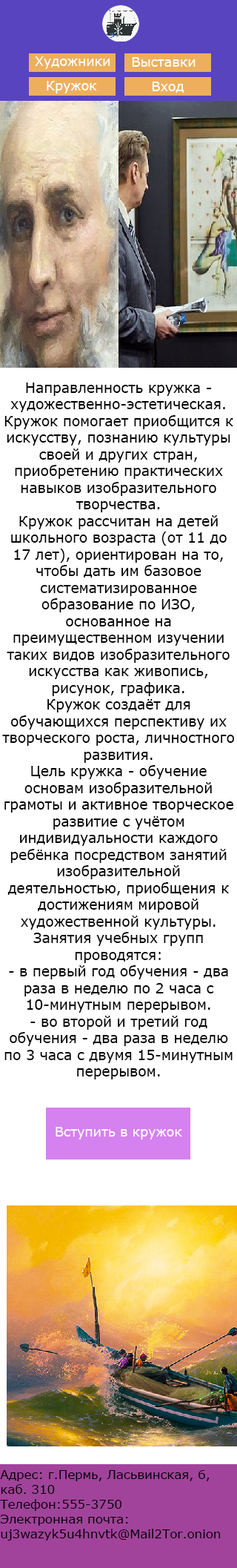
<style>
.page{position:relative;width:237px;height:1568px;background:#ffffff}
.page>*{position:absolute;margin:0}
.t1{font:13.1px "Verdana";color:#fefefe}
.t2{font:13.9px "Verdana";color:#000000}
.t3{font:12.4px "Verdana";color:#000000}
</style>
<div class="page">
<p class="t1" style="left:35px;top:56px;width:75px;height:13px">Художники</p>
<p class="t1" style="left:132px;top:57px;width:64px;height:10px">Выставки</p>
<p class="t1" style="left:47px;top:81px;width:50px;height:12px">Кружок</p>
<p class="t1" style="left:152px;top:82px;width:33px;height:11px">Вход</p>
<p class="t2" style="left:2px;top:383px;width:233px;height:696px;text-align:center">Направленность кружка - художественно-эстетическая. Кружок помогает приобщится к искусству, познанию культуры своей и других стран, приобретению практических навыков изобразительного творчества.<br>Кружок рассчитан на детей школьного возраста (от 11 до 17 лет), ориентирован на то, чтобы дать им базовое систематизированное образование по ИЗО, основанное на преимущественном изучении таких видов изобразительного искусства как живопись, рисунок, графика.<br>Кружок создаёт для обучающихся перспективу их творческого роста, личностного развития.<br>Цель кружка - обучение основам изобразительной грамоты и активное творческое развитие с учётом индивидуальности каждого ребёнка посредством занятий изобразительной деятельностью, приобщения к достижениям мировой художественной культуры.<br>Занятия учебных групп проводятся:<br>- в первый год обучения - два раза в неделю по 2 часа с 10-минутным перерывом.<br>- во второй и третий год обучения - два раза в неделю по 3 часа с двумя 15-минутным перерывом.</p>
<p class="t3" style="left:0px;top:1470px;width:221px;height:71px">Адрес: г.Пермь, Ласьвинская, 6,<br>каб. 310<br>Телефон:555-3750<br>Электронная почта:<br>uj3wazyk5u4hnvtk@Mail2Tor.onion</p>
</div>
